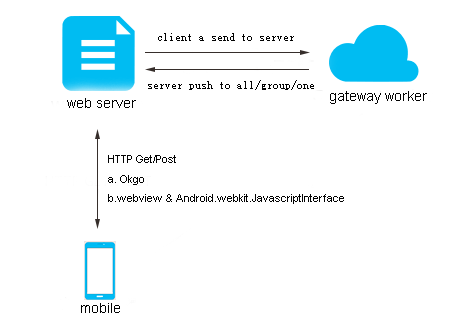
<style>
.page{position:relative;width:471px;height:318px;background:#ffffff}
.page>*{position:absolute;margin:0}
.t1{font:11px "SimSun";color:#020202}
.t2{font:14.4px "ArialMT";color:#020202}
.t3{font:11px "ArialMT";color:#020202}
</style>
<div class="page">
<p class="t1" style="left:158px;top:33px;width:136px;height:8px">client a send to server</p>
<p class="t1" style="left:148px;top:80px;width:166px;height:10px">server push to all/group/one</p>
<p class="t2" style="left:67px;top:98px;width:69px;height:10px">web server</p>
<p class="t2" style="left:330px;top:91px;width:97px;height:13px">gateway worker</p>
<p class="t3" style="left:108px;top:155px;width:236px;height:49px">HTTP Get/Post  <br>a. Okgo<br>b.webview &amp; Android.webkit.JavascriptInterface</p>
<p class="t2" style="left:81px;top:303px;width:39px;height:10px">mobile</p>
</div>
